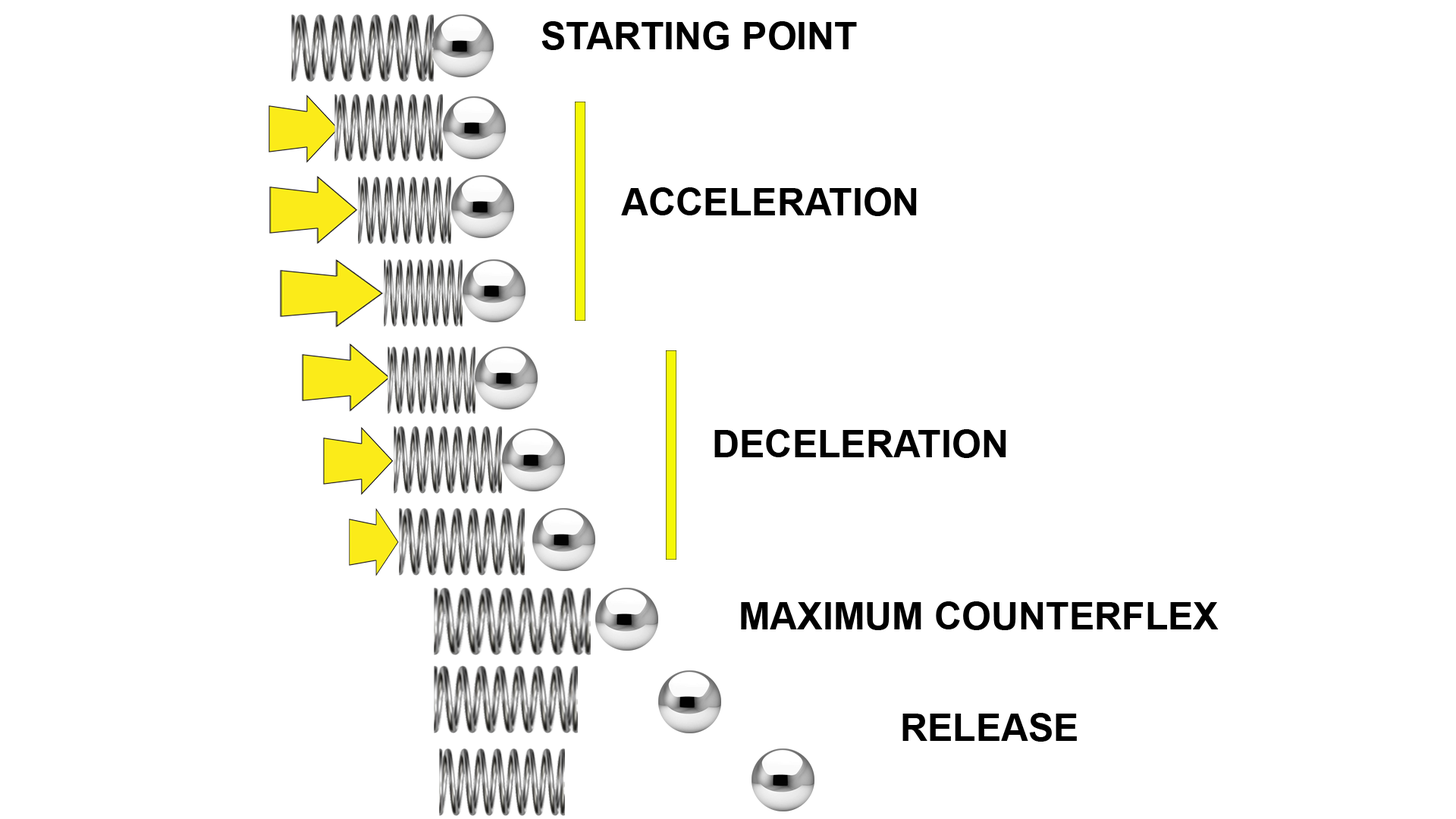
<style>
.page{position:relative;width:1456px;height:819px;background:#ffffff}
.page>*{position:absolute;margin:0}
.t1{font:37.9px "Arial-BoldMT";color:#000000}
</style>
<div class="page">
<p class="t1" style="left:541px;top:21px;width:316px;height:29px">STARTING POINT</p>
<p class="t1" style="left:621px;top:187px;width:296px;height:29px">ACCELERATION</p>
<p class="t1" style="left:714px;top:429px;width:292px;height:29px">DECELERATION</p>
<p class="t1" style="left:741px;top:601px;width:478px;height:29px">MAXIMUM COUNTERFLEX</p>
<p class="t1" style="left:902px;top:713px;width:175px;height:29px">RELEASE</p>
</div>
